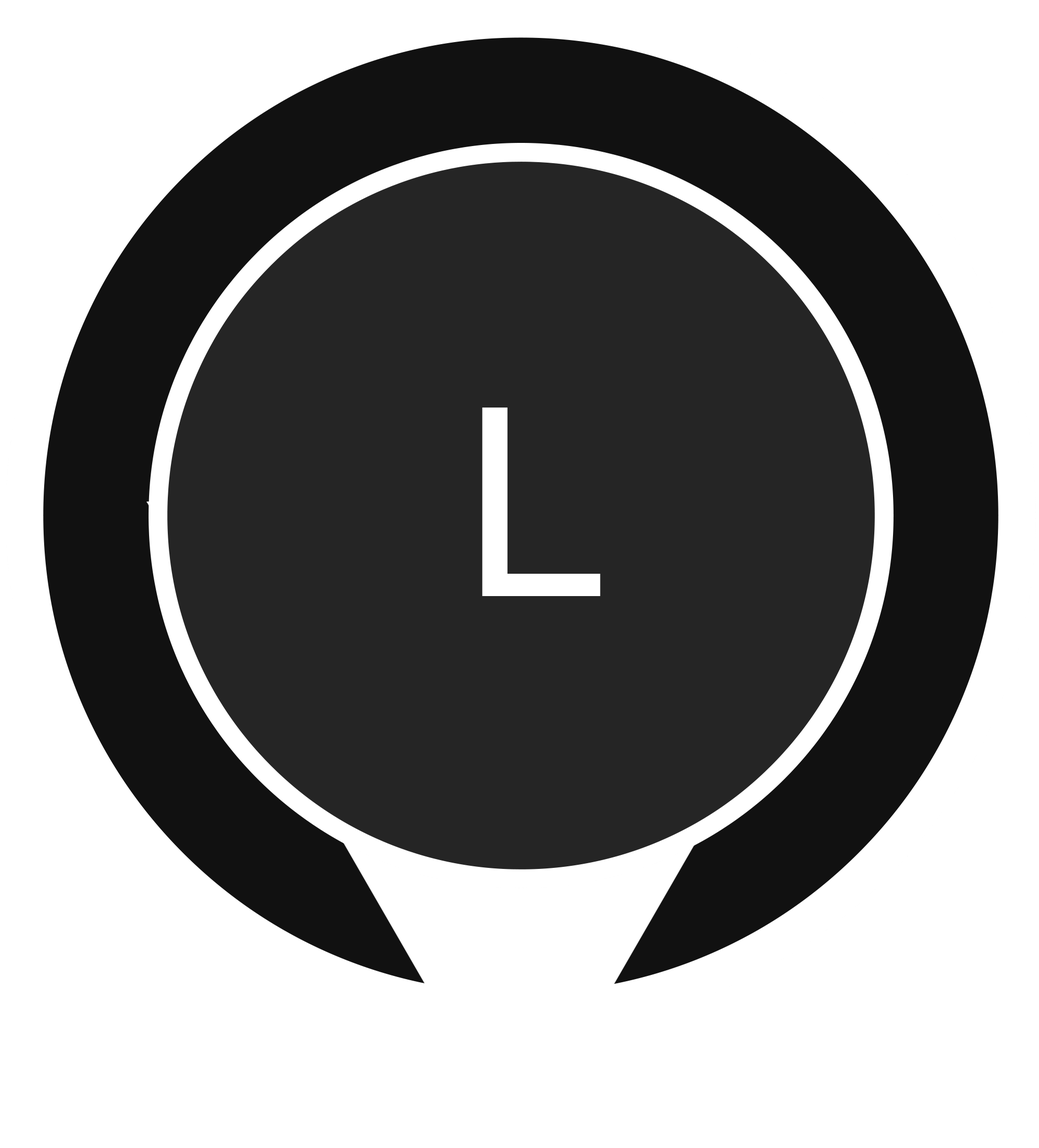
<style>
.page{position:relative;width:1039px;height:1148px;background:#ffffff}
.page>*{position:absolute;margin:0}
.t1{font:263px "ArialMT";color:#ffffff}
</style>
<div class="page">
<p class="t1" style="left:482px;top:407px;width:119px;height:189px">L</p>
</div>
